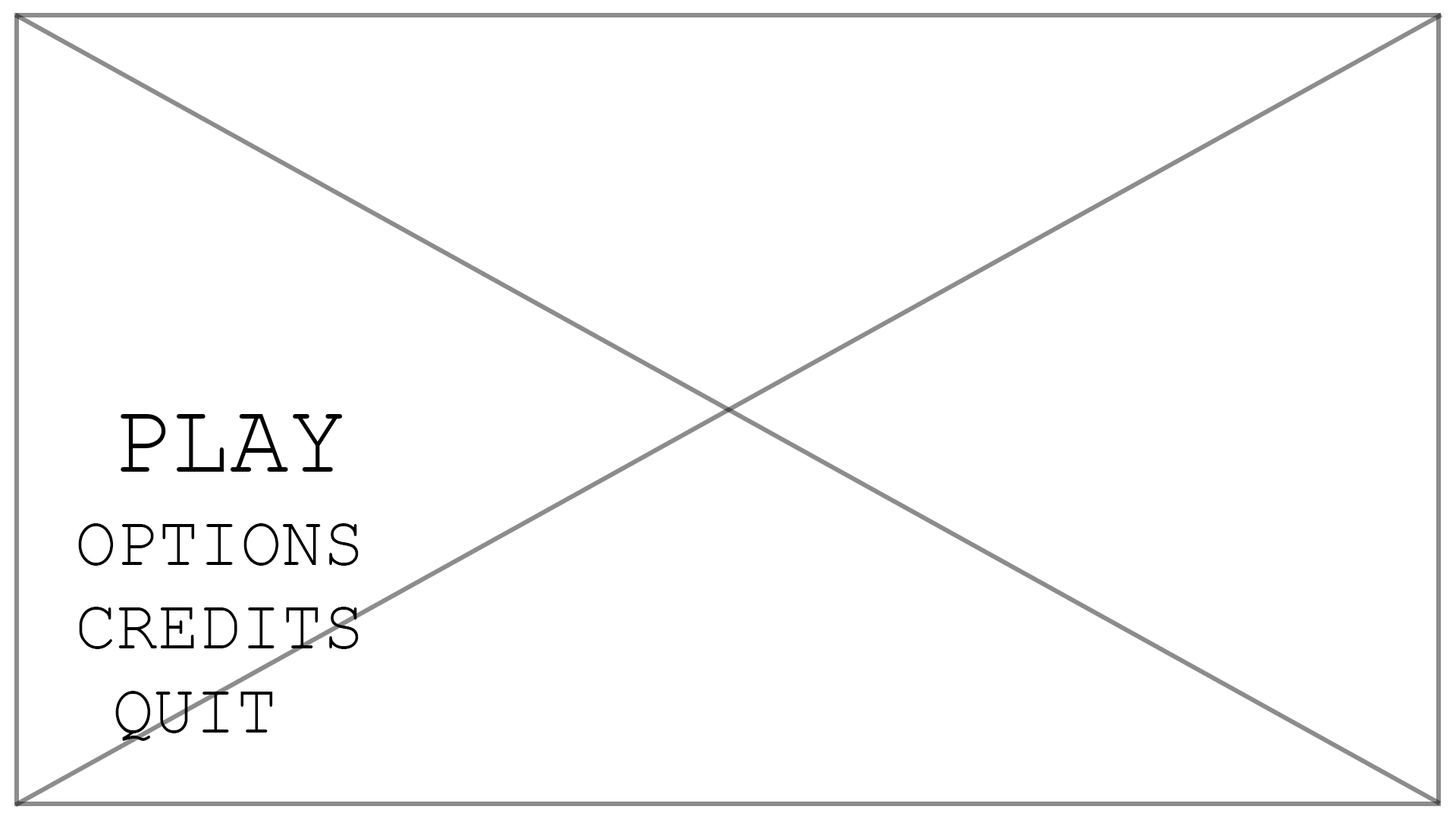
<style>
.page{position:relative;width:1456px;height:819px;background:#ffffff}
.page>*{position:absolute;margin:0}
.t1{font:101.4px "CourierNewPSMT";color:#000000;scale:0.97 1}
.t2{font:71.3px "CourierNewPSMT";color:#000000;scale:0.97 1}
</style>
<div class="page">
<p class="t1" style="left:121px;top:414px;width:222px;height:58px">PLAY</p>
<p class="t2" style="left:78px;top:523px;width:281px;height:43px">OPTIONS</p>
<p class="t2" style="left:79px;top:607px;width:280px;height:42px">CREDITS</p>
<p class="t2" style="left:115px;top:691px;width:158px;height:50px">QUIT</p>
</div>
